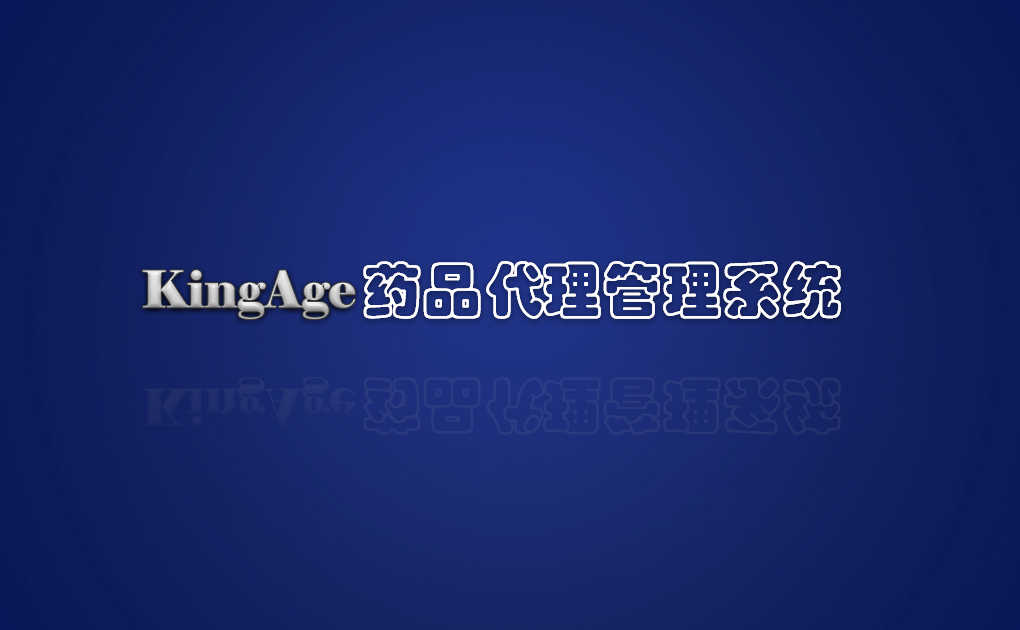
<style>
.page{position:relative;width:1020px;height:630px}
.page>*{position:absolute;margin:0}
.t1{font:50px "Elephant-Regular"}
.t2{font:60px "STCaiyun";color:#fefefe}
.t3{font:50px "Elephant-Regular";color:#212e6f}
.t4{font:60px "STCaiyun";color:#2b397f}
</style>
<div class="page">
<p class="t1" style="left:142px;top:270px;width:213px;height:49px">KingAge</p>
<p class="t1" style="left:142px;top:270px;width:213px;height:49px">KingAge</p>
<p class="t2" style="left:363px;top:261px;width:478px;height:58px">药品代理管理系统</p>
<p class="t2" style="left:363px;top:261px;width:478px;height:58px">药品代理管理系统</p>
<p class="t3" style="left:142px;top:377px;width:213px;height:49px">KingAge</p>
<p class="t4" style="left:363px;top:377px;width:478px;height:58px">药品代理管理系统</p>
</div>
